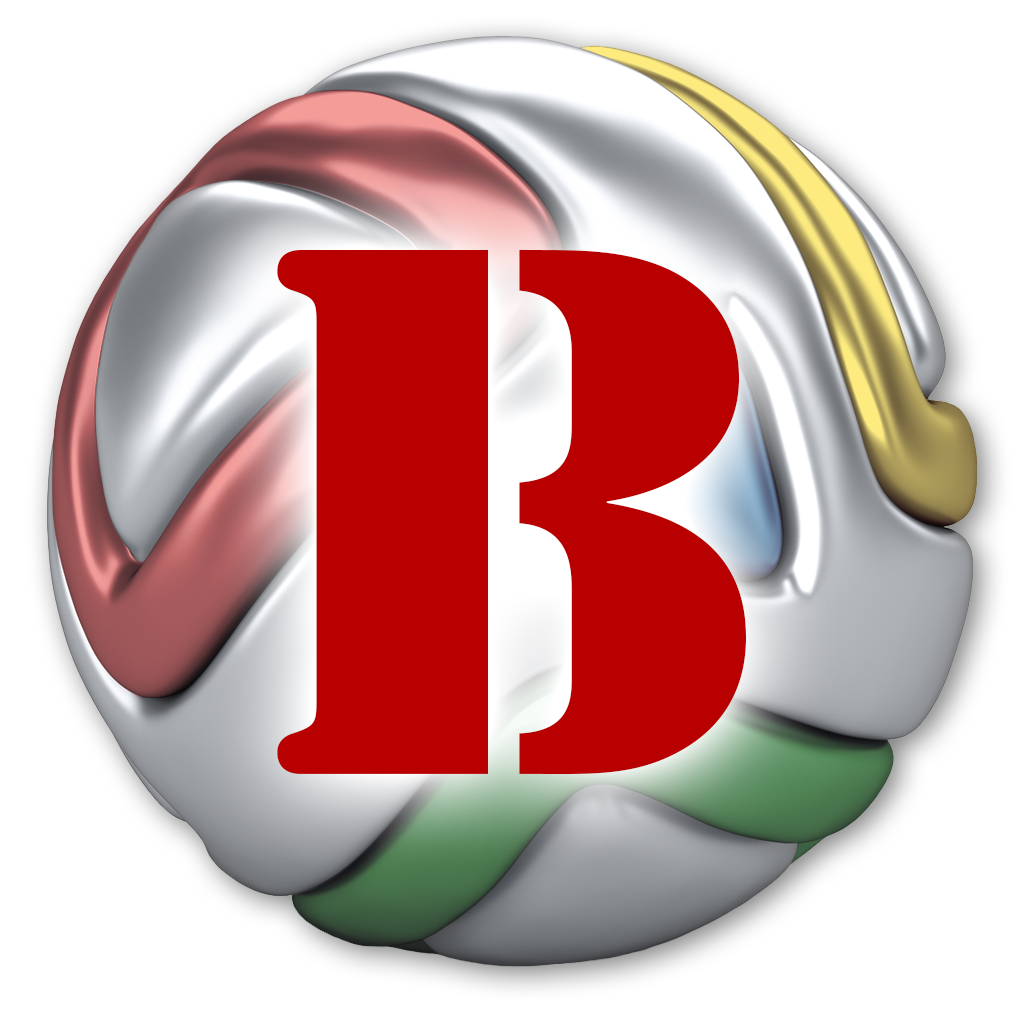
<style>
.page{position:relative;width:1024px;height:1024px;background:#ffffff}
.page>*{position:absolute;margin:0}
.t1{font:700px "StencilStd";color:#b90000}
</style>
<div class="page">
<p class="t1" style="left:277px;top:250px;width:469px;height:524px">B</p>
</div>
